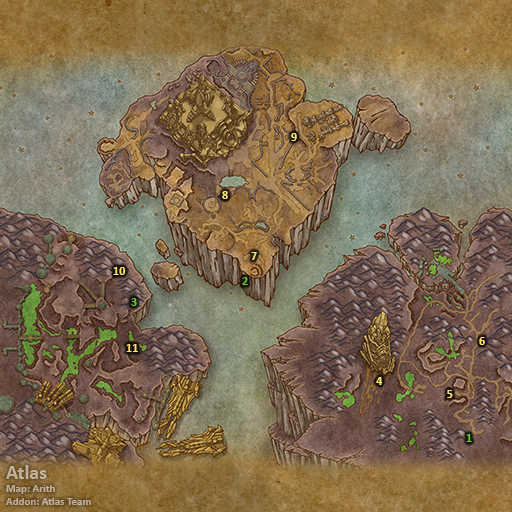
<style>
.page{position:relative;width:512px;height:512px}
.page>*{position:absolute;margin:0}
.t1{font:12px "Calibri-Bold";color:#fee570}
.t2{font:12px "Calibri-Bold";color:#66cc33}
.t3{font:11px "Calibri-Bold";color:#c2b09b}
.t4{font:20px "Calibri-Bold";color:#c2b09b}
</style>
<div class="page">
<p class="t1" style="left:291px;top:133px;width:6px;height:8px">9</p>
<p class="t1" style="left:222px;top:191px;width:6px;height:8px">8</p>
<p class="t1" style="left:251px;top:252px;width:6px;height:8px">7</p>
<p class="t1" style="left:113px;top:267px;width:13px;height:8px">10</p>
<p class="t2" style="left:242px;top:277px;width:6px;height:8px">2</p>
<p class="t2" style="left:131px;top:298px;width:6px;height:8px">3</p>
<p class="t1" style="left:479px;top:337px;width:6px;height:8px">6</p>
<p class="t1" style="left:126px;top:344px;width:12px;height:8px">11</p>
<p class="t1" style="left:376px;top:377px;width:7px;height:8px">4</p>
<p class="t1" style="left:447px;top:390px;width:6px;height:8px">5</p>
<p class="t2" style="left:466px;top:434px;width:6px;height:8px">1</p>
<p class="t3" style="left:6px;top:465px;width:85px;height:40px"><span class="t4">Atlas<br></span>Map: Arith<br>Addon: Atlas Team</p>
</div>
